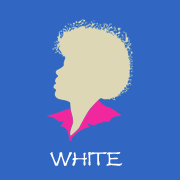
<style>
.page{position:relative;width:180px;height:180px;background:#3167c2}
.page>*{position:absolute;margin:0}
.t1{font:24px "FZSTK--GBK1-0";letter-spacing:-0.06em;color:#ffffff}
.t2{font:24px "FZSTK--GBK1-0";letter-spacing:-0.06em;color:#3167c2}
</style>
<div class="page">
<p class="t1" style="left:6px;top:152px;width:117px;height:14px"><span class="t2">LAN</span>WHITE</p>
</div>
